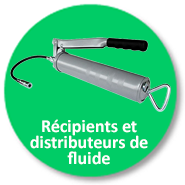
<style>
.page{position:relative;width:185px;height:185px;background:#00cc66}
.page>*{position:absolute;margin:0}
.t1{font:18px/16px "Calibri-Bold";color:#ffffff}
</style>
<div class="page">
<p class="t1" style="left:30px;top:119px;width:118px;height:46px;text-align:center">Récipients et <br>distributeurs de fluide</p>
</div>
